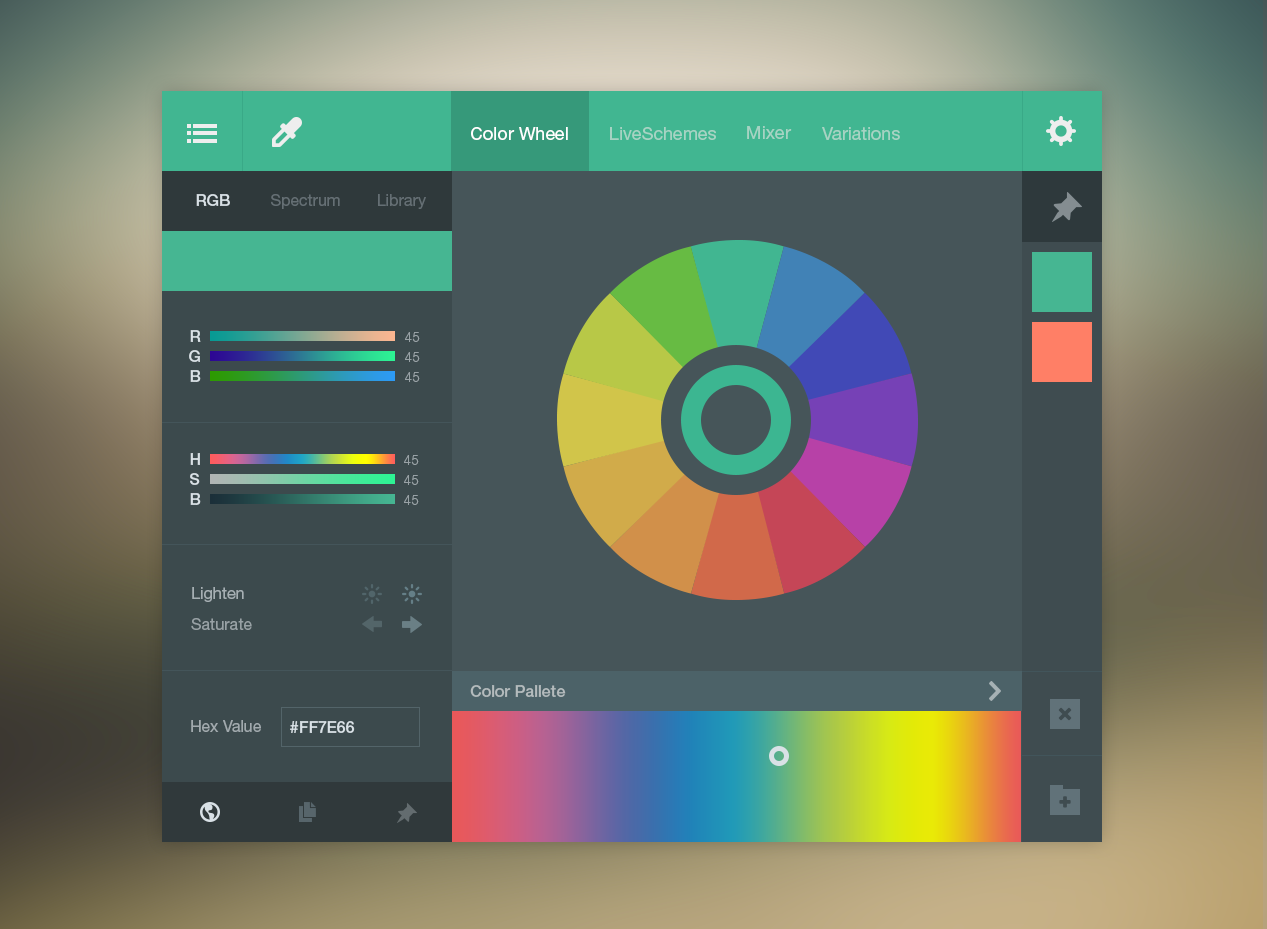
<style>
.page{position:relative;width:1267px;height:929px}
.page>*{position:absolute;margin:0}
.t1{font:18px "HelveticaNeueLTStd-Roman";color:#a6d3c3}
.t2{font:18px "HelveticaNeueLTStd-Roman";color:#ffffff}
.t3{font:16px "HelveticaNeueLTStd-Md";color:#d9e1e6}
.t4{font:16px "HelveticaNeueLTStd-Roman";color:#656f74}
.t5{font:14px "HelveticaNeueLTStd-Lt";color:#98a1a5}
.t6{font:16px "HelveticaNeueLTStd-Roman";color:#a6afb3}
.t7{font:16px "HelveticaNeueLTStd-Roman";color:#98a1a5}
.t8{font:16px "HelveticaNeueLTStd-Md";color:#b4bbbd}
.t9{font:16px "HelveticaNeueLTStd-Roman";color:#a2aaae}
</style>
<div class="page">
<p class="t1" style="left:747px;top:126px;width:45px;height:13px">Mixer</p>
<p class="t2" style="left:471px;top:127px;width:97px;height:13px">Color Wheel</p>
<p class="t1" style="left:610px;top:127px;width:106px;height:13px">LiveSchemes</p>
<p class="t1" style="left:822px;top:127px;width:78px;height:13px">Variations</p>
<p class="t3" style="left:196px;top:194px;width:34px;height:12px">RGB</p>
<p class="t4" style="left:271px;top:194px;width:69px;height:15px">Spectrum</p>
<p class="t4" style="left:378px;top:194px;width:48px;height:15px">Library</p>
<p class="t3" style="left:190px;top:330px;width:11px;height:12px">R</p>
<p class="t5" style="left:405px;top:332px;width:15px;height:10px">45</p>
<p class="t3" style="left:189px;top:350px;width:11px;height:12px">G</p>
<p class="t5" style="left:405px;top:352px;width:15px;height:10px">45</p>
<p class="t3" style="left:190px;top:370px;width:11px;height:12px">B</p>
<p class="t5" style="left:405px;top:372px;width:15px;height:10px">45</p>
<p class="t3" style="left:190px;top:453px;width:10px;height:12px">H</p>
<p class="t5" style="left:404px;top:455px;width:15px;height:10px">45</p>
<p class="t3" style="left:190px;top:473px;width:10px;height:12px">S</p>
<p class="t5" style="left:404px;top:475px;width:15px;height:10px">45</p>
<p class="t3" style="left:190px;top:493px;width:11px;height:12px">B</p>
<p class="t5" style="left:404px;top:495px;width:15px;height:10px">45</p>
<p class="t6" style="left:192px;top:587px;width:52px;height:15px">Lighten</p>
<p class="t7" style="left:191px;top:618px;width:61px;height:12px">Saturate</p>
<p class="t8" style="left:470px;top:685px;width:96px;height:12px">Color Pallete</p>
<p class="t9" style="left:191px;top:720px;width:70px;height:12px">Hex Value</p>
<p class="t3" style="left:290px;top:721px;width:65px;height:12px">#FF7E66</p>
</div>
